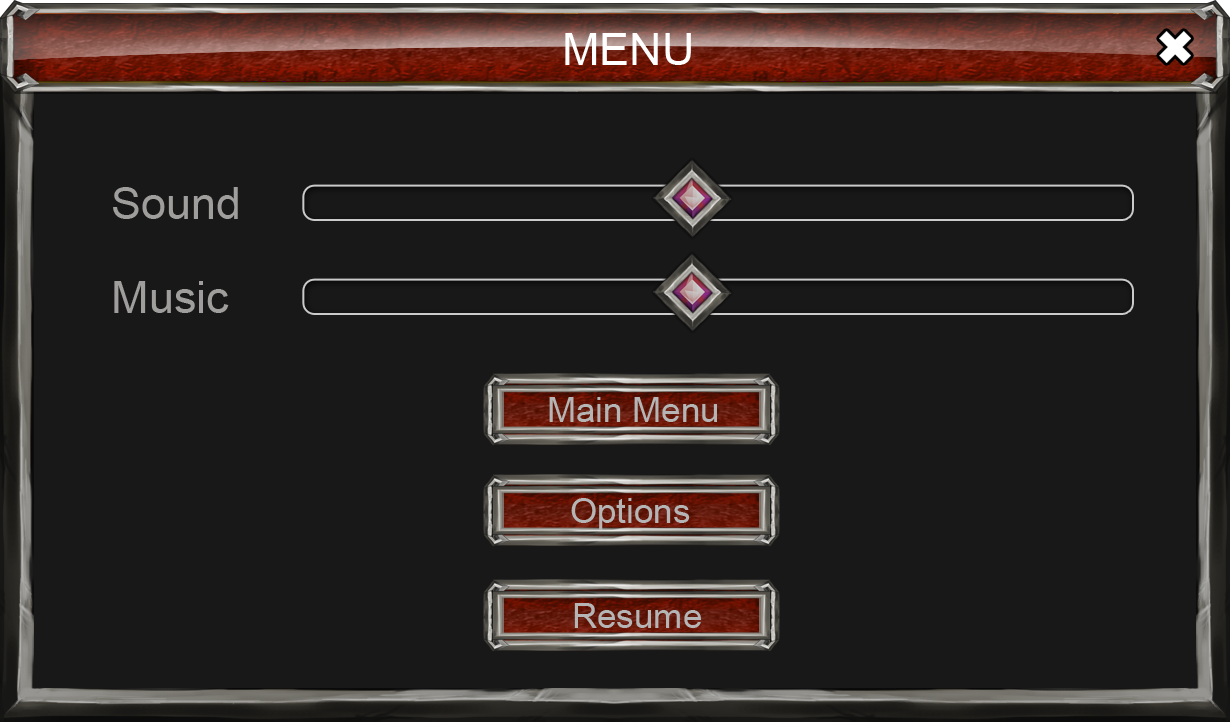
<style>
.page{position:relative;width:1230px;height:722px;background:#181818}
.page>*{position:absolute;margin:0}
.t1{font:45px "ArialMT";color:#ffffff}
.t2{font:45px "ArialMT";color:#9f9e9c}
.t3{font:35px "ArialMT";color:#b5b5b5}
</style>
<div class="page">
<p class="t1" style="left:565px;top:33px;width:126px;height:32px">MENU</p>
<p class="t2" style="left:113px;top:187px;width:125px;height:32px">Sound</p>
<p class="t2" style="left:114px;top:281px;width:115px;height:32px">Music</p>
<p class="t3" style="left:549px;top:397px;width:168px;height:25px">Main Menu</p>
<p class="t3" style="left:571px;top:498px;width:119px;height:32px">Options</p>
<p class="t3" style="left:574px;top:603px;width:127px;height:25px">Resume</p>
</div>
